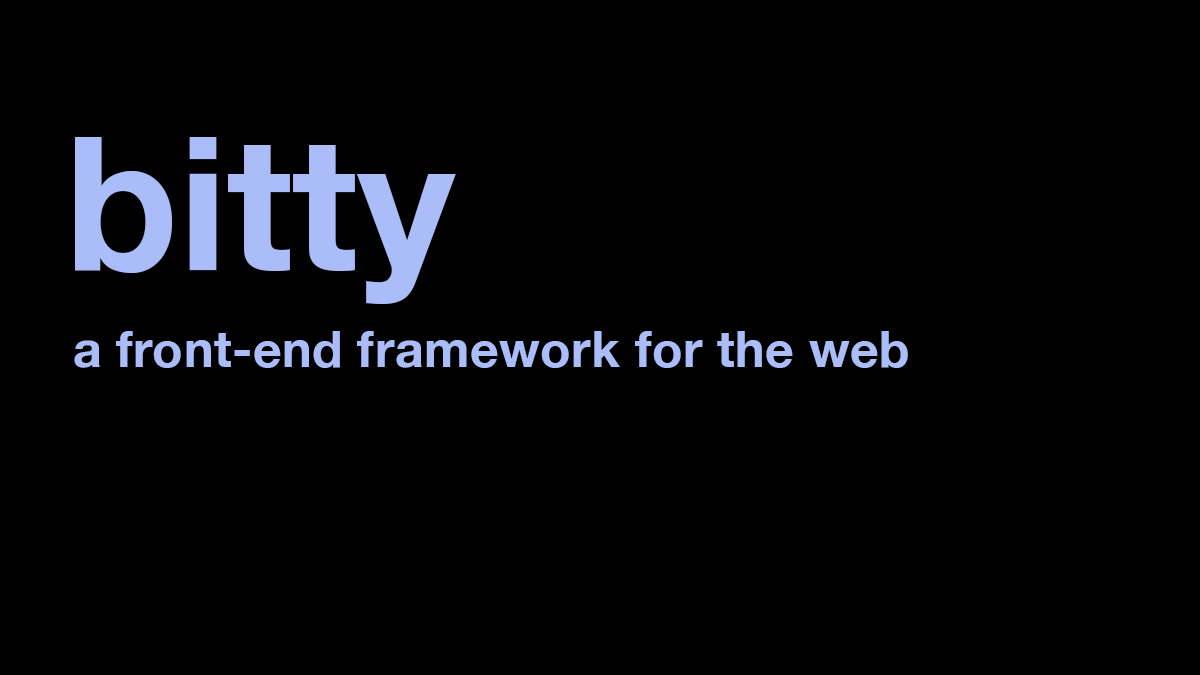
<style>
.page{position:relative;width:1200px;height:675px;background:#000000}
.page>*{position:absolute;margin:0}
.t1{font:186px "HelveticaNeue-Bold";color:#abbdf8}
.t2{font:50px "HelveticaNeue-Bold";letter-spacing:0.01em;color:#abbdf8}
</style>
<div class="page">
<p class="t1" style="left:75px;top:137px;width:381px;height:167px">bitty</p>
<p class="t2" style="left:74px;top:331px;width:834px;height:37px">a front-end framework for the web</p>
</div>
